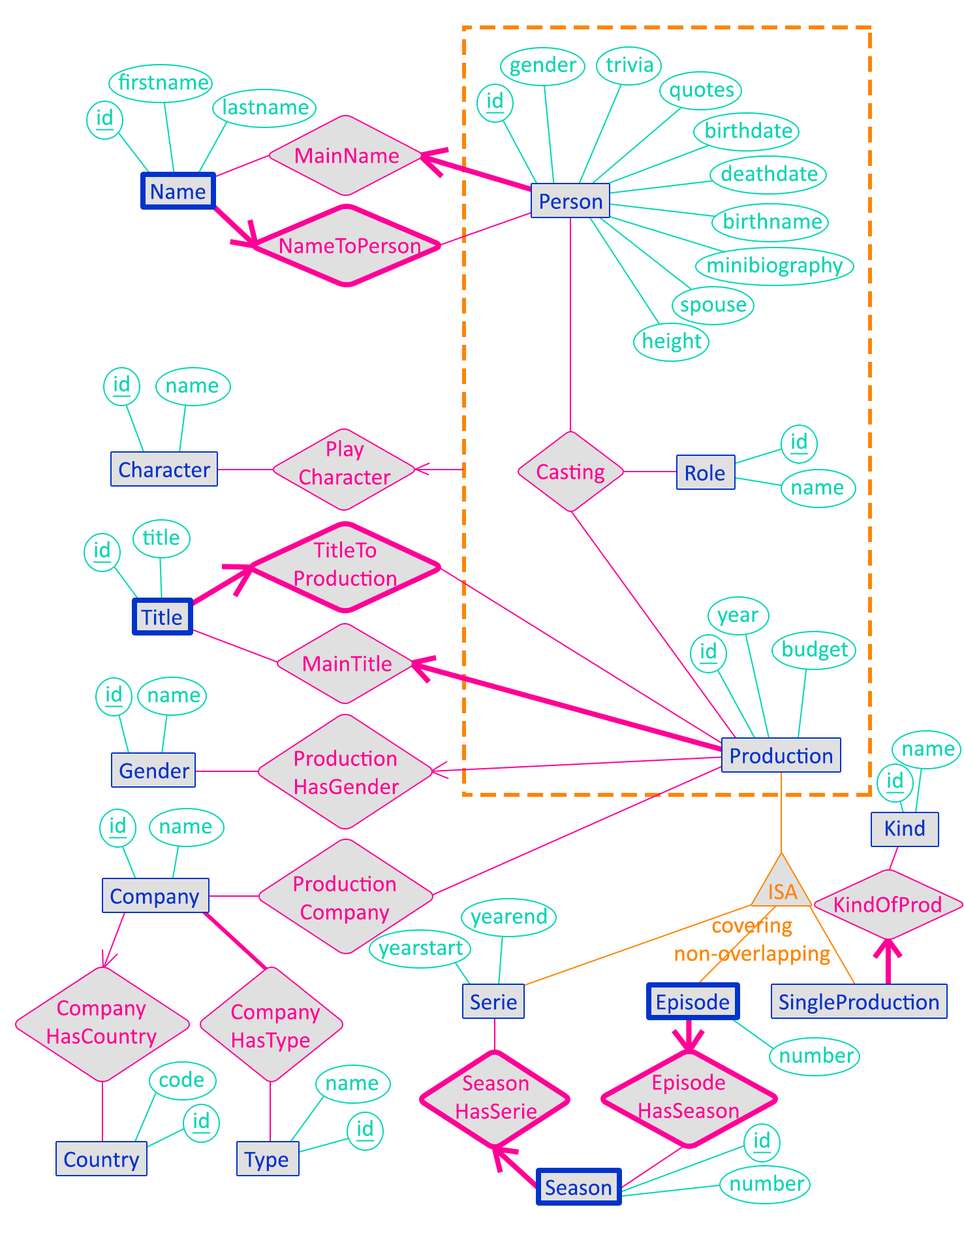
<style>
.page{position:relative;width:964px;height:1237px;background:#ffffff}
.page>*{position:absolute;margin:0}
.t1{font:23.5px "Calibri";color:#00d6b5}
.t2{font:23.5px "Calibri";color:#00d6b5;text-decoration:underline}
.t3{font:23.5px "Calibri";color:#ff0096}
.t4{font:23.5px "Calibri";color:#0033cc}
.t5{font:23.5px "Calibri";color:#ff8400}
</style>
<div class="page">
<p class="t1" style="left:510px;top:55px;width:67px;height:21px">gender</p>
<p class="t1" style="left:606px;top:56px;width:47px;height:16px">trivia</p>
<p class="t1" style="left:118px;top:73px;width:90px;height:17px">firstname</p>
<p class="t1" style="left:670px;top:82px;width:64px;height:19px">quotes</p>
<p class="t1" style="left:223px;top:98px;width:86px;height:17px">lastname</p>
<p class="t2" style="left:486px;top:91px;width:19px;height:23px">id</p>
<p class="t2" style="left:96px;top:108px;width:18px;height:23px">id</p>
<p class="t1" style="left:706px;top:121px;width:87px;height:17px">birthdate</p>
<p class="t3" style="left:296px;top:148px;width:103px;height:15px">MainName</p>
<p class="t1" style="left:721px;top:165px;width:97px;height:17px">deathdate</p>
<p class="t4" style="left:151px;top:183px;width:55px;height:16px">Name</p>
<p class="t4" style="left:541px;top:193px;width:62px;height:16px">Person</p>
<p class="t1" style="left:724px;top:212px;width:98px;height:17px">birthname</p>
<p class="t3" style="left:280px;top:238px;width:140px;height:15px">NameToPerson</p>
<p class="t1" style="left:708px;top:256px;width:136px;height:21px">minibiography</p>
<p class="t1" style="left:681px;top:300px;width:66px;height:16px">spouse</p>
<p class="t1" style="left:643px;top:332px;width:59px;height:21px">height</p>
<p class="t2" style="left:113px;top:375px;width:18px;height:22px">id</p>
<p class="t1" style="left:166px;top:381px;width:53px;height:12px">name</p>
<p class="t2" style="left:791px;top:432px;width:18px;height:22px">id</p>
<p class="t3" style="left:299px;top:439px;width:92px;height:46px;text-align:center">Play<br>Character</p>
<p class="t4" style="left:119px;top:461px;width:92px;height:16px">Character</p>
<p class="t3" style="left:537px;top:464px;width:68px;height:19px">Casting</p>
<p class="t4" style="left:686px;top:464px;width:39px;height:17px">Role</p>
<p class="t1" style="left:792px;top:482px;width:52px;height:13px">name</p>
<p class="t1" style="left:142px;top:528px;width:38px;height:17px">title</p>
<p class="t2" style="left:93px;top:541px;width:19px;height:22px">id</p>
<p class="t3" style="left:294px;top:541px;width:102px;height:45px;text-align:center">TitleTo<br>Production</p>
<p class="t4" style="left:141px;top:608px;width:41px;height:17px">Title</p>
<p class="t1" style="left:718px;top:610px;width:41px;height:16px">year</p>
<p class="t2" style="left:700px;top:642px;width:18px;height:22px">id</p>
<p class="t1" style="left:783px;top:640px;width:66px;height:21px">budget</p>
<p class="t3" style="left:304px;top:654px;width:88px;height:17px">MainTitle</p>
<p class="t2" style="left:105px;top:685px;width:18px;height:22px">id</p>
<p class="t1" style="left:148px;top:690px;width:52px;height:13px">name</p>
<p class="t3" style="left:295px;top:750px;width:105px;height:45px">Production<br>HasGender</p>
<p class="t4" style="left:731px;top:747px;width:101px;height:16px">Production</p>
<p class="t1" style="left:903px;top:744px;width:52px;height:12px">name</p>
<p class="t4" style="left:119px;top:762px;width:71px;height:16px">Gender</p>
<p class="t2" style="left:887px;top:771px;width:18px;height:22px">id</p>
<p class="t2" style="left:109px;top:816px;width:18px;height:22px">id</p>
<p class="t1" style="left:160px;top:821px;width:52px;height:13px">name</p>
<p class="t4" style="left:886px;top:819px;width:39px;height:17px">Kind</p>
<p class="t3" style="left:294px;top:875px;width:102px;height:49px;text-align:center">Production<br>Company</p>
<p class="t4" style="left:110px;top:888px;width:90px;height:20px">Company</p>
<p class="t5" style="left:770px;top:883px;width:28px;height:16px">ISA</p>
<p class="t3" style="left:835px;top:895px;width:106px;height:17px">KindOfProd</p>
<p class="t1" style="left:471px;top:907px;width:76px;height:21px">yearend</p>
<p class="t5" style="left:675px;top:917px;width:155px;height:48px;text-align:center">covering<br>non-overlapping</p>
<p class="t1" style="left:379px;top:940px;width:84px;height:19px">yearstart</p>
<p class="t3" style="left:47px;top:1000px;width:110px;height:48px;text-align:center">Company<br>HasCountry</p>
<p class="t4" style="left:471px;top:994px;width:46px;height:15px">Serie</p>
<p class="t4" style="left:657px;top:993px;width:72px;height:20px">Episode</p>
<p class="t4" style="left:780px;top:993px;width:159px;height:20px">SingleProduction</p>
<p class="t3" style="left:231px;top:1003px;width:90px;height:49px">Company<br>HasType</p>
<p class="t1" style="left:780px;top:1046px;width:75px;height:17px">number</p>
<p class="t1" style="left:159px;top:1070px;width:45px;height:17px">code</p>
<p class="t3" style="left:639px;top:1073px;width:100px;height:45px;text-align:center">Episode<br>HasSeason</p>
<p class="t1" style="left:326px;top:1078px;width:53px;height:12px">name</p>
<p class="t3" style="left:456px;top:1075px;width:81px;height:44px;text-align:center">Season<br>HasSerie</p>
<p class="t2" style="left:193px;top:1111px;width:18px;height:22px">id</p>
<p class="t2" style="left:356px;top:1119px;width:19px;height:22px">id</p>
<p class="t2" style="left:753px;top:1131px;width:19px;height:22px">id</p>
<p class="t4" style="left:64px;top:1151px;width:76px;height:20px">Country</p>
<p class="t4" style="left:244px;top:1151px;width:45px;height:20px">Type</p>
<p class="t4" style="left:546px;top:1179px;width:66px;height:16px">Season</p>
<p class="t1" style="left:731px;top:1174px;width:74px;height:17px">number</p>
</div>
